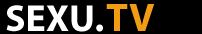
<style>
.page{position:relative;width:202px;height:34px;background:#000000}
.page>*{position:absolute;margin:0}
.t1{font:38px "MyriadPro-Bold";color:#ffffff}
.t2{font:40px "MyriadPro-Bold";color:#f29c13}
</style>
<div class="page">
<p class="t1" style="left:6px;top:5px;width:97px;height:27px">SEXU.</p>
<p class="t2" style="left:106px;top:4px;width:49px;height:27px">TV</p>
</div>
